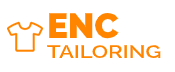
<style>
.page{position:relative;width:175px;height:72px;background:#ffffff}
.page>*{position:absolute;margin:0}
.t1{font:35px "Raleway-Black";color:#ff8400}
.t2{font:18px "Raleway-SemiBold";color:#ff8400;scale:1.22 1}
</style>
<div class="page">
<p class="t1" style="left:49px;top:13px;width:70px;height:26px">ENC</p>
<p class="t2" style="left:47px;top:45px;width:114px;height:14px">TAILORING</p>
</div>
